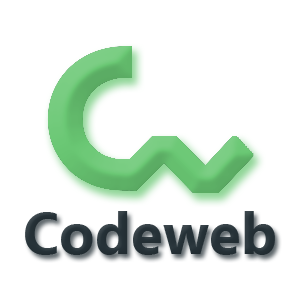
<style>
.page{position:relative;width:300px;height:300px;background:#ffffff}
.page>*{position:absolute;margin:0}
.t1{font:58.3px "Ebrima-Bold";color:#263238}
</style>
<div class="page">
<p class="t1" style="left:25px;top:211px;width:250px;height:44px">Codeweb</p>
</div>
